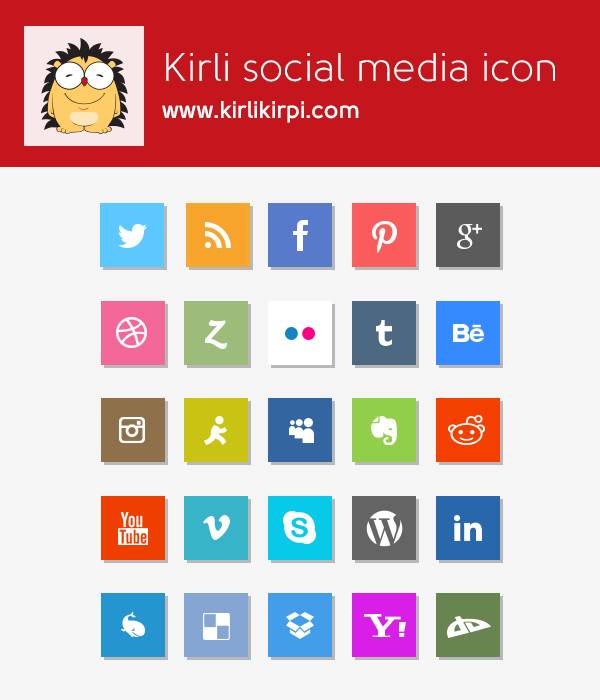
<style>
.page{position:relative;width:600px;height:700px;background:#f5f5f5}
.page>*{position:absolute;margin:0}
.t1{font:40px "Solomon-Book";color:#ffffff}
.t2{font:24px "Solomon-Bold";color:#ffffff}
</style>
<div class="page">
<p class="t1" style="left:166px;top:53px;width:389px;height:29px">Kirli social media icon</p>
<p class="t2" style="left:162px;top:101px;width:197px;height:22px">www.kirlikirpi.com</p>
</div>
